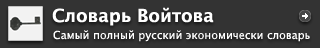
<style>
.page{position:relative;width:320px;height:48px;background:#333333}
.page>*{position:absolute;margin:0}
.t1{font:18px "LucidaGrande-Bold";color:#ffffff}
.t2{font:11px "LucidaGrande";color:#ffffff}
</style>
<div class="page">
<p class="t1" style="left:52px;top:7px;width:162px;height:19px">Cловарь Войтова</p>
<p class="t2" style="left:53px;top:30px;width:257px;height:12px">Самый полный русский экономически словарь</p>
</div>
